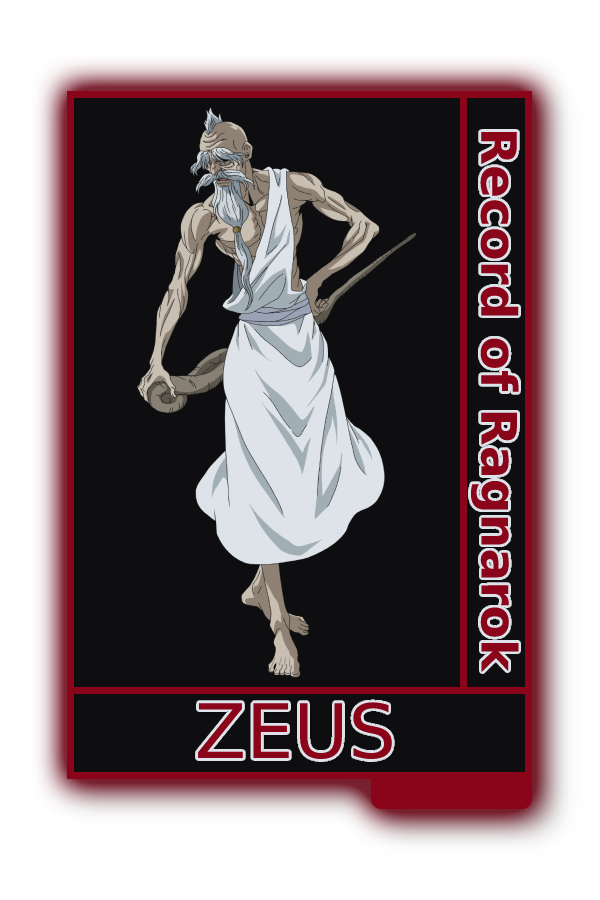
<style>
.page{position:relative;width:600px;height:900px;background:#0e0e10}
.page>*{position:absolute;margin:0}
.t1{font:48.8px "MADETOMMY-Bold";color:#8a051a}
.t2{font:75px "CoolveticaRg-Regular";color:#8a051a}
</style>
<div class="page">
<p class="t1" style="left:470px;top:131px;width:49px;height:542px;rotate:90deg">Record of Ragnarok</p>
<p class="t2" style="left:198px;top:702px;width:194px;height:58px">ZEUS</p>
</div>
